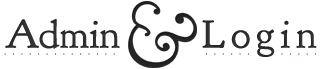
<style>
.page{position:relative;width:326px;height:69px;background:#ffffff}
.page>*{position:absolute;margin:0}
.t1{font:40px "GoudyBookletter1911";color:#333333;scale:1.04 1}
.t2{font:40px "GoudyBookletter1911";letter-spacing:0.14em;color:#333333;scale:1.04 1}
</style>
<div class="page">
<p class="t1" style="left:5px;top:19px;width:115px;height:30px">Admin</p>
<p class="t2" style="left:202px;top:20px;width:115px;height:37px">Login</p>
</div>
